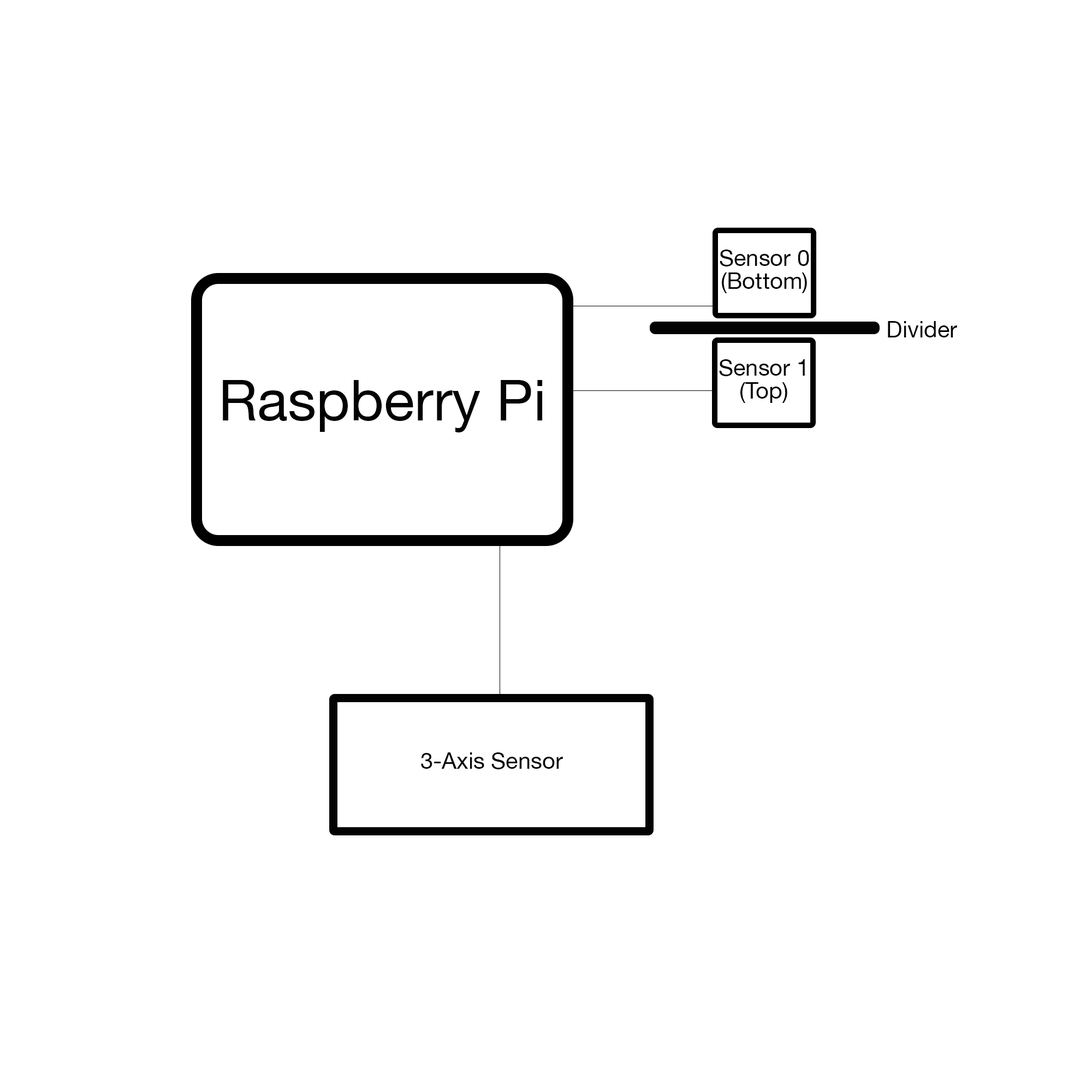
<style>
.page{position:relative;width:1092px;height:1092px;background:#ffffff}
.page>*{position:absolute;margin:0}
.t1{font:22.7px/22.7px "HelveticaNeue";color:#030303}
.t2{font:22.7px "HelveticaNeue";color:#030303}
.t3{font:56.9px "HelveticaNeue";color:#030303}
</style>
<div class="page">
<p class="t1" style="left:720px;top:250px;width:89px;height:43px;text-align:center">Sensor 0<br>(Bottom)</p>
<p class="t2" style="left:888px;top:321px;width:69px;height:16px">Divider</p>
<p class="t1" style="left:719px;top:359px;width:86px;height:44px;text-align:center">Sensor 1<br>(Top)</p>
<p class="t3" style="left:223px;top:380px;width:320px;height:52px">Raspberry Pi</p>
<p class="t2" style="left:421px;top:752px;width:142px;height:17px">3-Axis Sensor</p>
</div>
